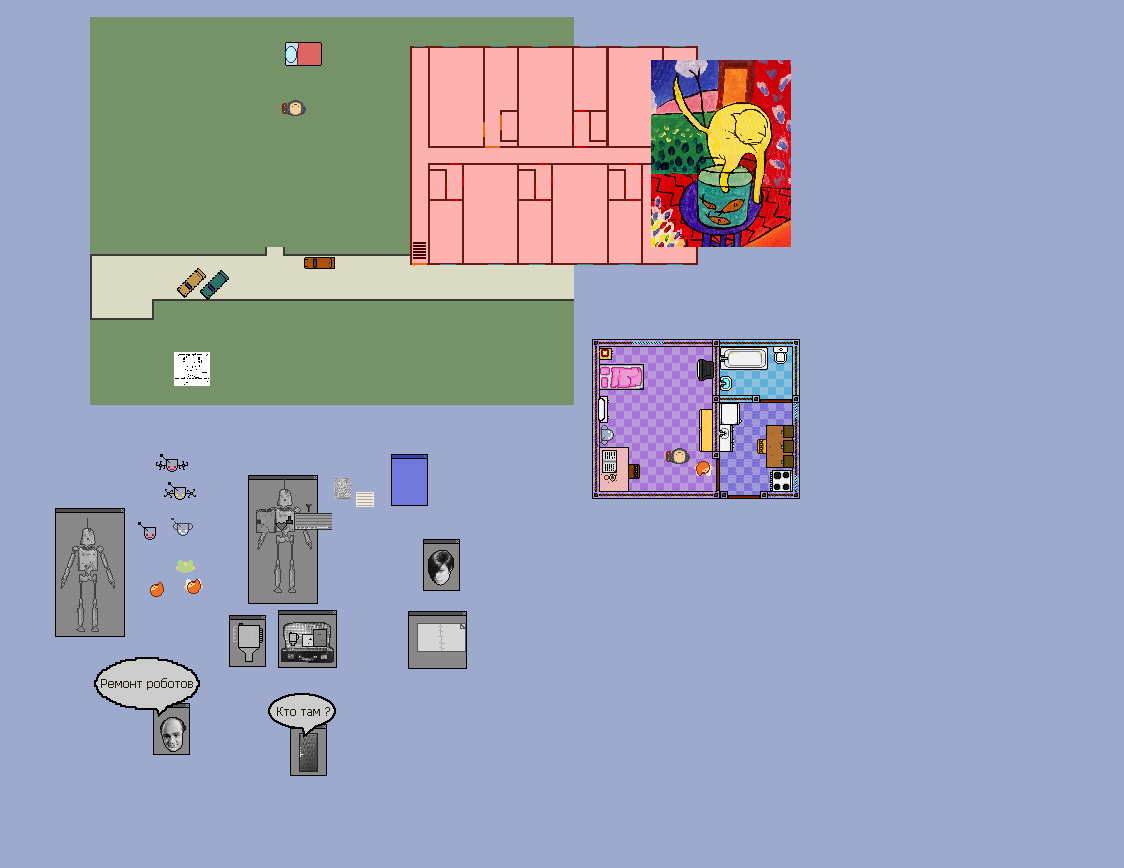
<style>
.page{position:relative;width:1124px;height:868px;background:#9da9cd}
.page>*{position:absolute;margin:0}
.t1{font:12px "Tahoma";color:#211e0a}
.t2{font:12px "Tahoma";color:#1e1b09}
</style>
<div class="page">
<p class="t1" style="left:101px;top:678px;width:92px;height:12px">Ремонт роботов</p>
<p class="t2" style="left:277px;top:707px;width:53px;height:9px">Кто там ?</p>
</div>
